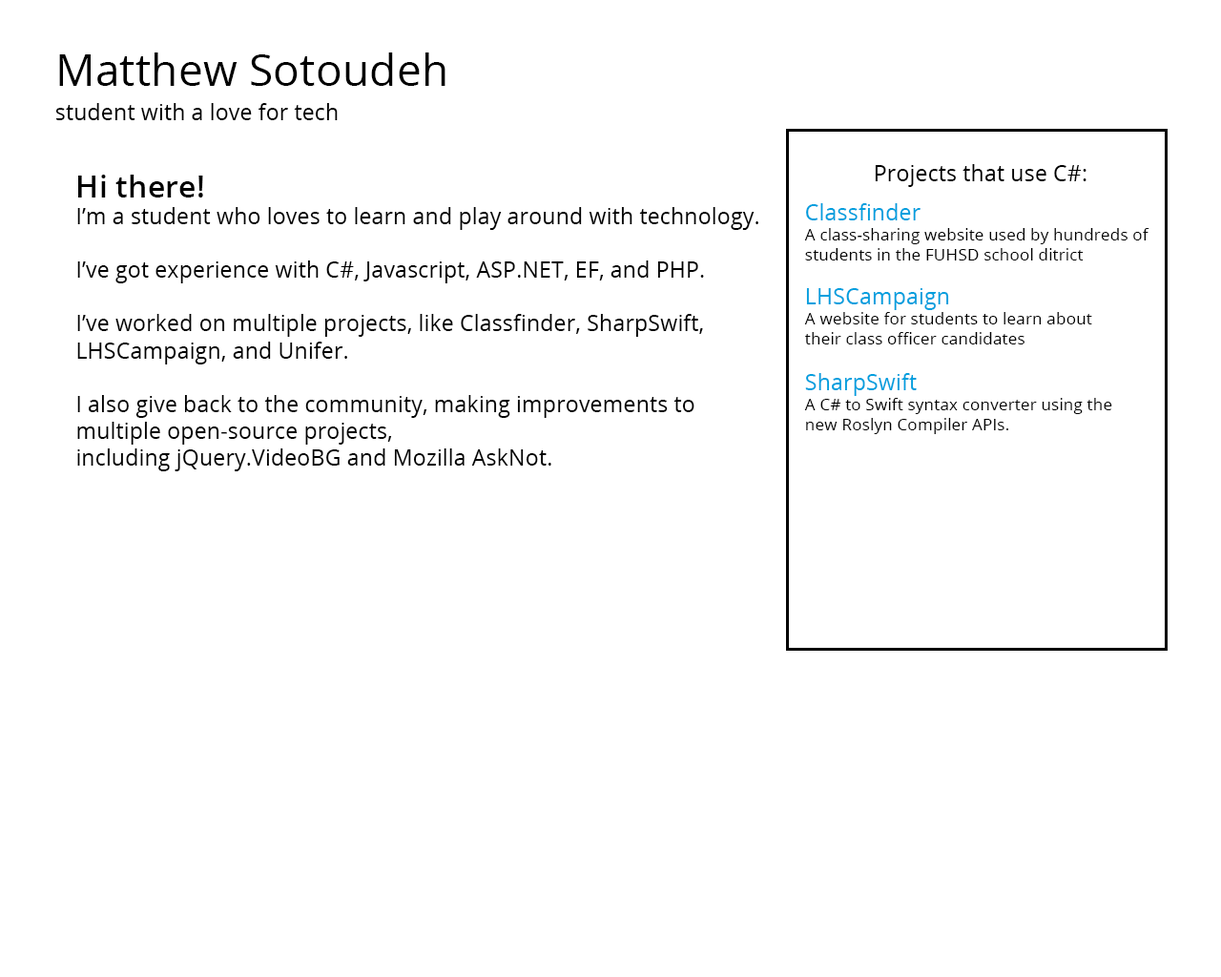
<style>
.page{position:relative;width:1221px;height:977px;background:#ffffff}
.page>*{position:absolute;margin:0}
.t1{font:44.3px "OpenSans";color:#000000}
.t2{font:22.3px "OpenSans";color:#000000}
.t3{font:30.9px "OpenSans-Semibold";color:#000000}
.t4{font:16.6px "OpenSans";color:#000000}
.t5{font:22.3px "OpenSans";color:#009fde}
</style>
<div class="page">
<p class="t1" style="left:59px;top:52px;width:386px;height:34px">Matthew Sotoudeh</p>
<p class="t2" style="left:55px;top:103px;width:283px;height:17px">student with a love for tech</p>
<p class="t2" style="left:875px;top:164px;width:211px;height:23px">Projects that use C#:</p>
<p class="t2" style="left:77px;top:175px;width:681px;height:296px"><span class="t3">Hi there!</span><br>I’m a student who loves to learn and play around with technology.<br><br>I’ve got experience with C#, Javascript, ASP.NET, EF, and PHP.<br><br>I’ve worked on multiple projects, like Classfinder, SharpSwift,<br>LHSCampaign, and Unifer.<br><br>I also give back to the community, making improvements to<br>multiple open-source projects,<br>including jQuery.VideoBG and Mozilla AskNot.</p>
<p class="t4" style="left:804px;top:203px;width:345px;height:57px"><span class="t5">Classfinder<br></span>A class-sharing website used by hundreds of<br>students in the FUHSD school ditrict</p>
<p class="t4" style="left:804px;top:288px;width:288px;height:56px"><span class="t5">LHSCampaign<br></span>A website for students to learn about<br>their class officer candidates</p>
<p class="t4" style="left:804px;top:373px;width:308px;height:61px"><span class="t5">SharpSwift<br></span>A C# to Swift syntax converter using the <br>new Roslyn Compiler APIs.</p>
</div>
